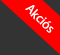
<style>
.page{position:relative;width:60px;height:55px;background:#333333}
.page>*{position:absolute;margin:0}
.t1{font:13px "MyriadPro-Regular";color:#ffffff}
</style>
<div class="page">
<p class="t1" style="left:25px;top:5px;width:29px;height:28px;rotate:44deg">Akciós</p>
</div>
